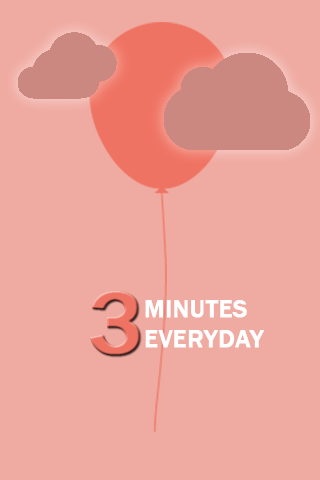
<style>
.page{position:relative;width:320px;height:480px;background:#efaaa1}
.page>*{position:absolute;margin:0}
.t1{font:91.4px "FranklinGothic-Medium";color:#ef7363;font-weight:bold}
.t2{font:25.4px "FranklinGothic-Medium";color:#ffffff;font-weight:bold}
</style>
<div class="page">
<p class="t1" style="left:90px;top:291px;width:50px;height:65px">3</p>
<p class="t2" style="left:145px;top:300px;width:119px;height:48px">MINUTES <br>EVERYDAY</p>
</div>
